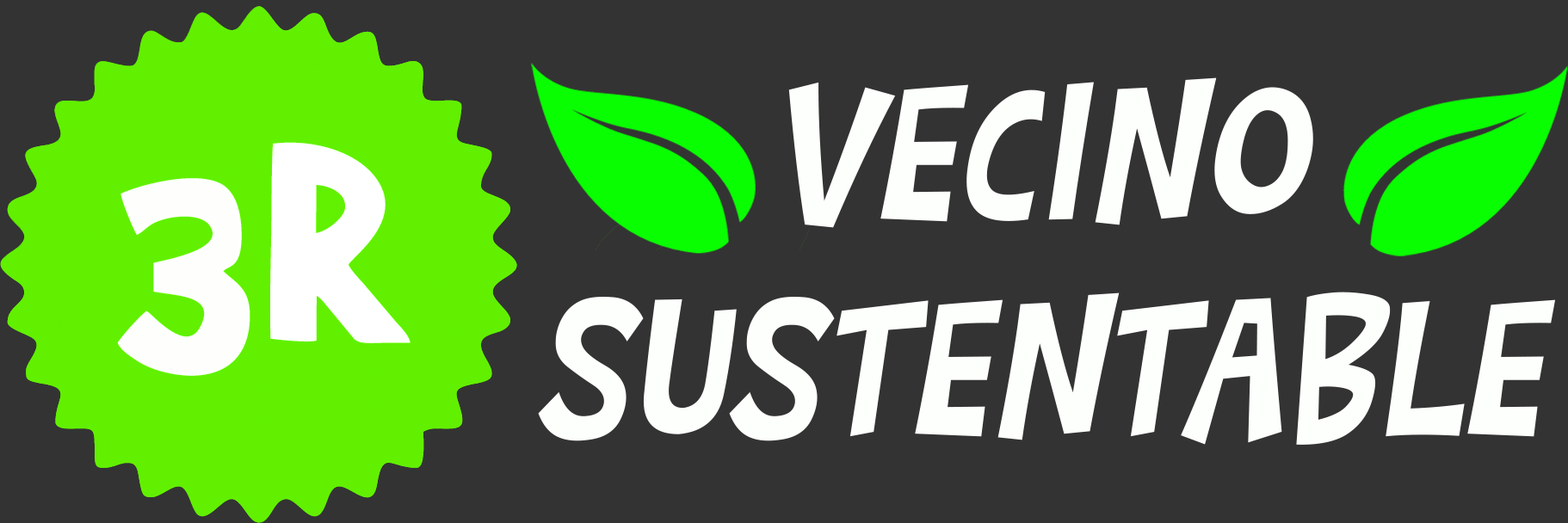
<style>
.page{position:relative;width:1568px;height:523px;background:#333333}
.page>*{position:absolute;margin:0}
.t1{font:215.1px/215.1px "BarthowheelItalic";color:#fffffc}
</style>
<div class="page">
<p class="t1" style="left:538px;top:77px;width:1018px;height:368px;text-align:center">VECINO<br>SUSTENTABLE</p>
</div>
